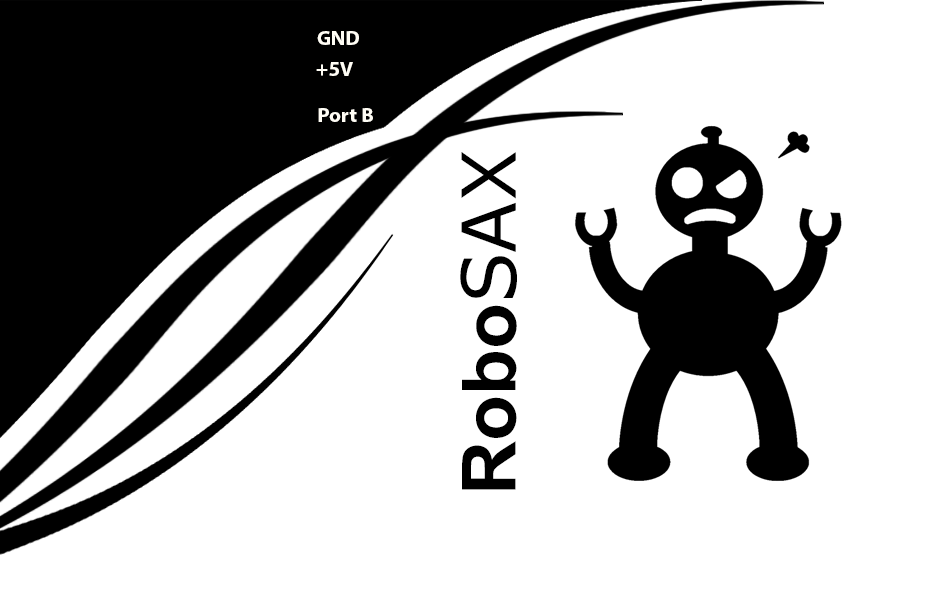
<style>
.page{position:relative;width:945px;height:591px;background:#ffffff}
.page>*{position:absolute;margin:0}
.t1{font:20.8px "MyriadPro-Bold";color:#fffdf5}
.t2{font:74.6px "Arial-BoldMT";color:#000000}
.t3{font:74.6px "Verdana";color:#000000}
</style>
<div class="page">
<p class="t1" style="left:317px;top:31px;width:42px;height:14px">GND</p>
<p class="t1" style="left:316px;top:62px;width:37px;height:14px">+5V</p>
<p class="t1" style="left:318px;top:108px;width:55px;height:14px">Port B</p>
<p class="t2" style="left:460px;top:152px;width:57px;height:338px;rotate:-90deg">Robo<span class="t3">SAX</span></p>
</div>
